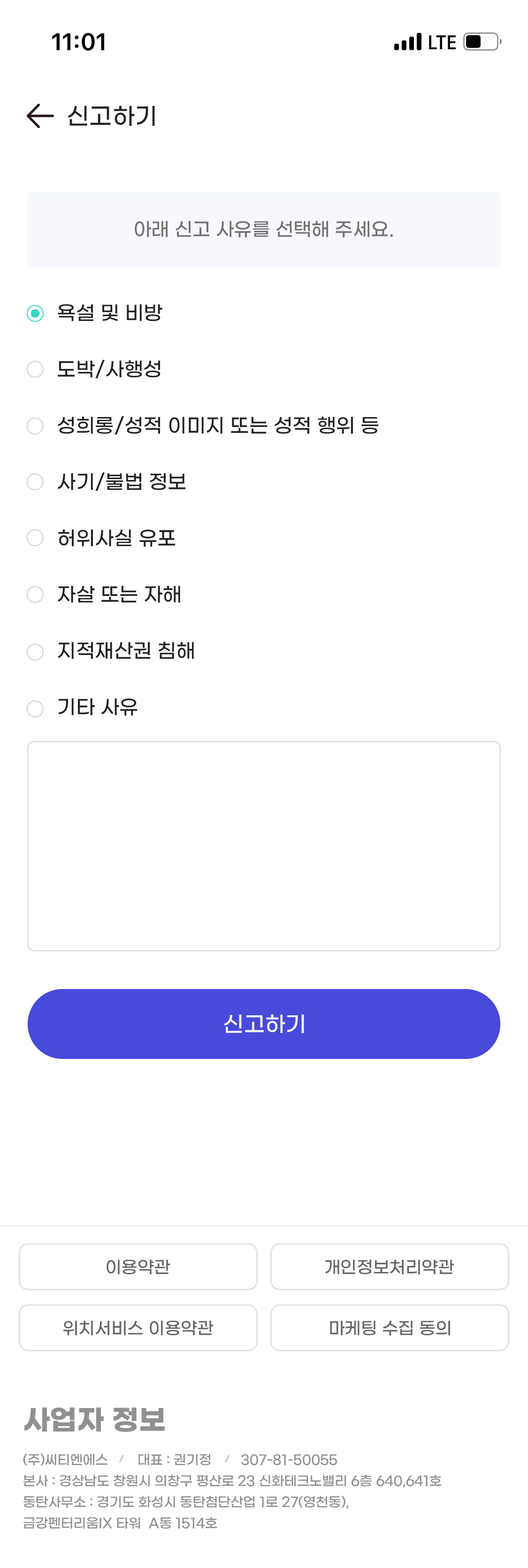
<style>
.page{position:relative;width:528px;height:1568px;background:#ffffff}
.page>*{position:absolute;margin:0}
.t1{font:23.5px "GmarketSansMedium";color:#222222}
.t2{font:18.8px "GmarketSansMedium";color:#727272}
.t3{font:19.7px/56.3px "GmarketSansMedium";color:#222222}
.t4{font:21.6px "GmarketSansMedium";color:#ffffff}
.t5{font:16.9px "GmarketSansMedium";color:#666666}
.t6{font:28.2px "GmarketSansBold";color:#909090}
.t7{font:13.1px/21.1px "GmarketSansMedium";color:#909090}
</style>
<div class="page">
<p class="t1" style="left:68px;top:106px;width:87px;height:20px">신고하기</p>
<p class="t2" style="left:135px;top:221px;width:258px;height:16px">아래 신고 사유를 선택해 주세요.</p>
<p class="t3" style="left:58px;top:304px;width:321px;height:412px">욕설 및 비방<br>도박/사행성<br>성희롱/성적 이미지 또는 성적 행위 등<br>사기/불법 정보<br>허위사실 유포<br>자살 또는 자해<br>지적재산권 침해<br>기타 사유</p>
<p class="t4" style="left:224px;top:1014px;width:80px;height:19px">신고하기</p>
<p class="t5" style="left:107px;top:1259px;width:63px;height:15px">이용약관</p>
<p class="t5" style="left:325px;top:1259px;width:129px;height:15px">개인정보처리약관</p>
<p class="t5" style="left:63px;top:1320px;width:150px;height:15px">위치서비스 이용약관</p>
<p class="t5" style="left:330px;top:1320px;width:120px;height:16px">마케팅 수집 동의</p>
<p class="t6" style="left:24px;top:1408px;width:141px;height:24px">사업자 정보</p>
<p class="t7" style="left:23px;top:1454px;width:418px;height:75px">(주)씨티엔에스        대표 : 권기정        307-81-50055<br>본사 : 경상남도 창원시 의창구 평산로 23 신화테크노밸리 6층 640,641호<br>동탄사무소 : 경기도 화성시 동탄첨단산업 1로 27(영천동),<br>금강펜터리움IX 타워  A동 1514호</p>
</div>
